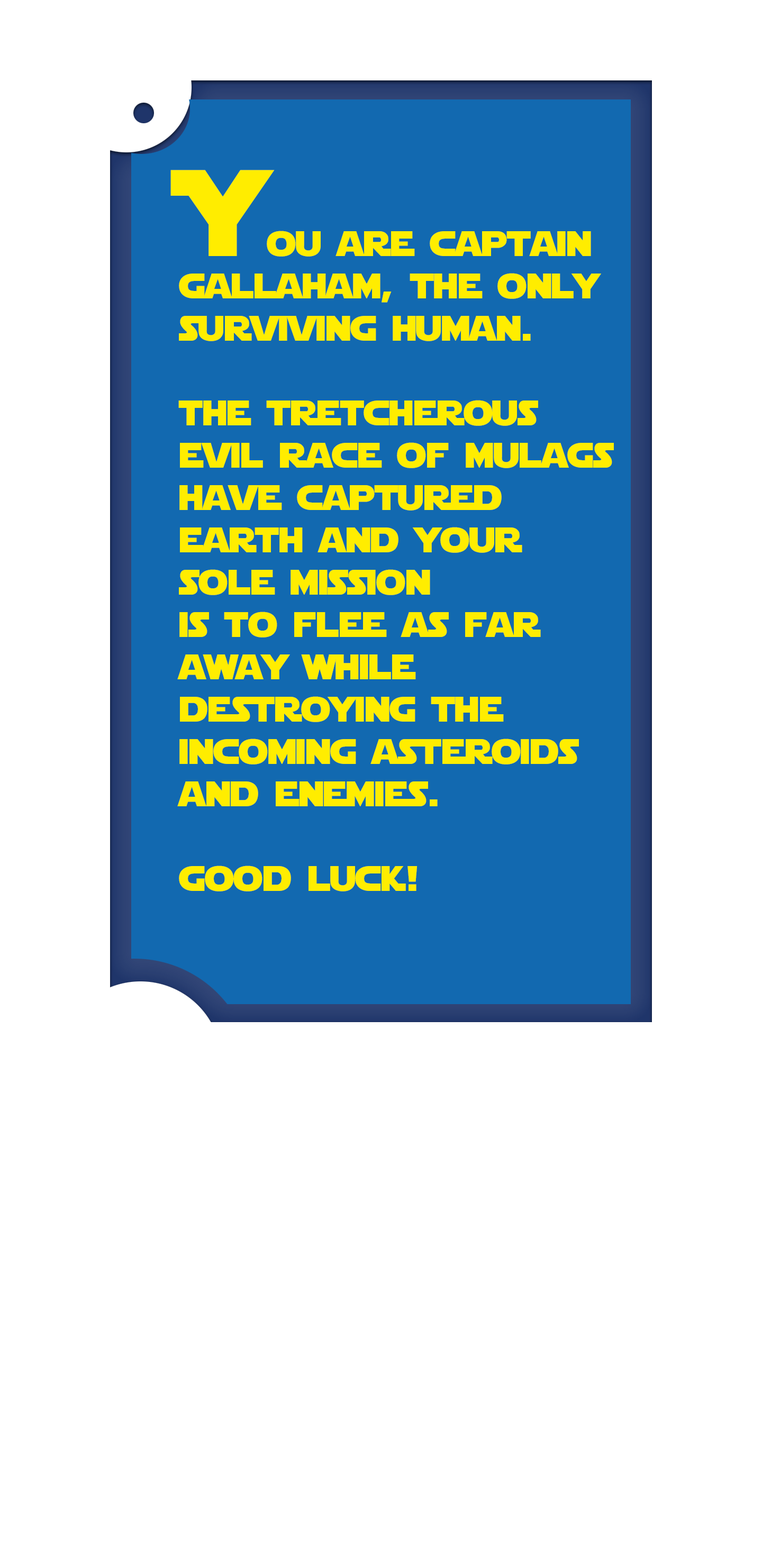
<style>
.page{position:relative;width:762px;height:1566px;background:#ffffff}
.page>*{position:absolute;margin:0}
.t1{font:35.3px "StarJedi";color:#ffed00}
.t2{font:121.9px "StarJedi";color:#ffed00}
</style>
<div class="page">
<p class="t1" style="left:170px;top:170px;width:444px;height:721px"><span class="t2">Y</span>ou are captain<br>gallaham, the only<br>surviving human. <br><br>the tretcherous<br>evil race of mulags<br>have captured <br>earth and your<br>sole mission<br>is to flee as far <br>away while <br>destroying the <br>incoming asteroids<br>and enemies.<br><br>good luck!</p>
</div>
